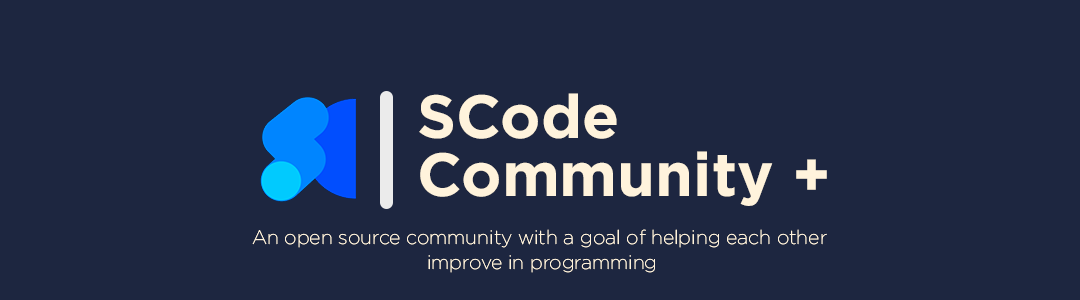
<style>
.page{position:relative;width:1080px;height:300px;background:#1d2640}
.page>*{position:absolute;margin:0}
.t1{font:104.5px/58.3px "Gotham-Bold";color:#fff3dc}
.t2{font:33.3px/25px "Gotham-XLight";color:#fff3dc}
</style>
<div class="page">
<p class="t1" style="left:419px;top:93px;width:408px;height:113px">SCode <br>Community +</p>
<p class="t2" style="left:252px;top:229px;width:575px;height:44px;text-align:center">An open source community with a goal of helping each other <br>improve in programming</p>
</div>
